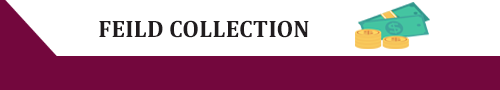
<style>
.page{position:relative;width:500px;height:90px;background:#ffffff}
.page>*{position:absolute;margin:0}
.t1{font:24px "Cambria-Bold";color:#201c1e}
</style>
<div class="page">
<p class="t1" style="left:99px;top:20px;width:210px;height:18px">FEILD COLLECTION</p>
</div>
